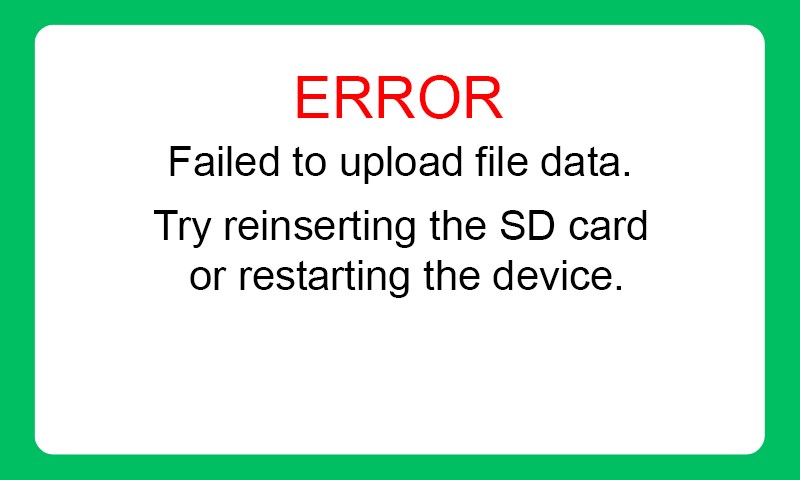
<style>
.page{position:relative;width:800px;height:480px;background:#ffffff}
.page>*{position:absolute;margin:0}
.t1{font:58.3px "ArialMT";color:#ff0000}
.t2{font:41.7px "ArialMT";color:#000000}
</style>
<div class="page">
<p class="t1" style="left:297px;top:75px;width:206px;height:44px">ERROR</p>
<p class="t2" style="left:170px;top:146px;width:459px;height:38px">Failed to upload file data.</p>
<p class="t2" style="left:154px;top:210px;width:493px;height:88px;text-align:center">Try reinserting the SD card <br>or restarting the device.</p>
</div>
